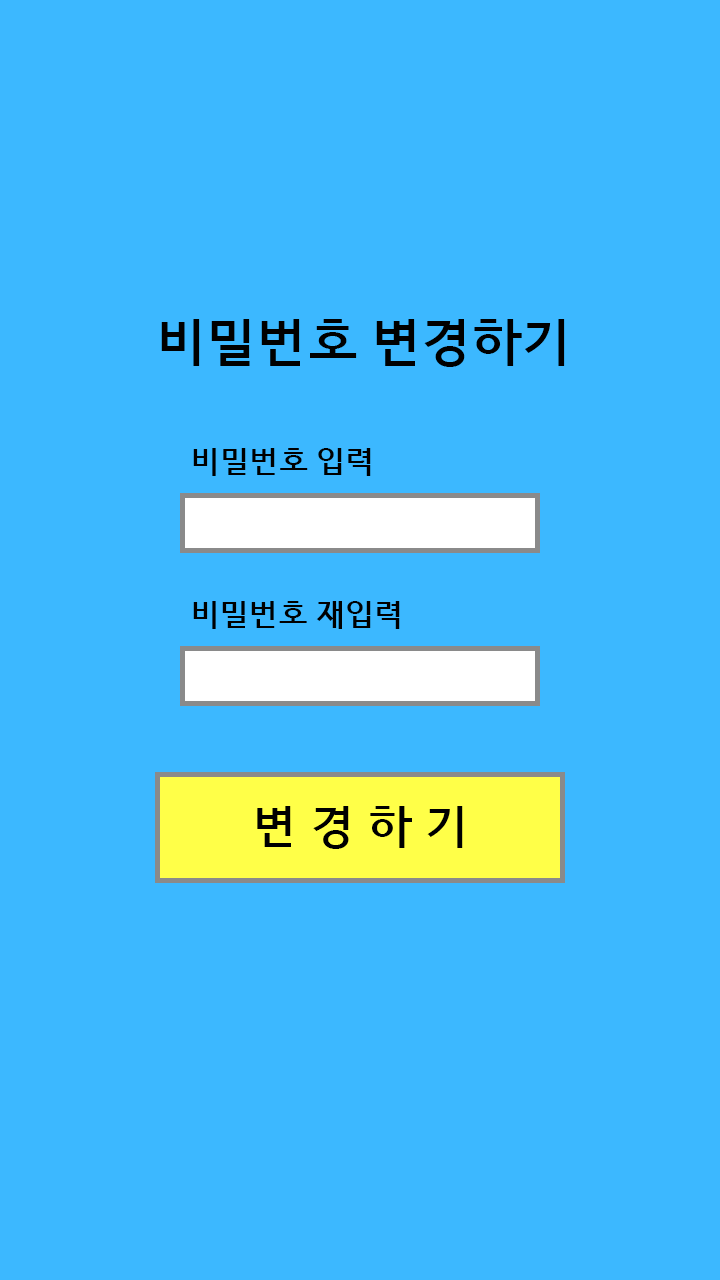
<style>
.page{position:relative;width:720px;height:1280px;background:#3cb8ff}
.page>*{position:absolute;margin:0}
.t1{font:50px "HCRDotum-Bold";color:#000000}
.t2{font:30px "HCRDotum-Bold";color:#000000}
.t3{font:45px "HCRDotum-Bold";color:#000000}
</style>
<div class="page">
<p class="t1" style="left:161px;top:319px;width:404px;height:48px">비밀번호 변경하기</p>
<p class="t2" style="left:193px;top:448px;width:178px;height:28px">비밀번호 입력</p>
<p class="t2" style="left:193px;top:601px;width:207px;height:28px">비밀번호 재입력</p>
<p class="t3" style="left:257px;top:806px;width:206px;height:43px">변 경 하 기</p>
</div>
